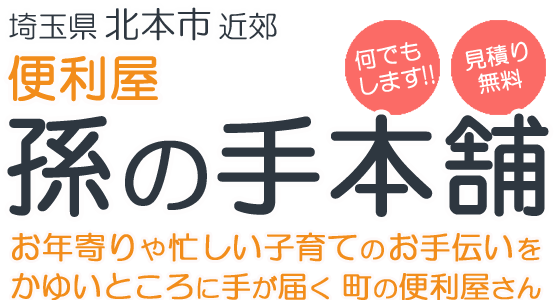
<style>
.page{position:relative;width:560px;height:300px;background:#ffffff}
.page>*{position:absolute;margin:0}
.t1{font:30px "HGMaruGothicMPRO";color:#2e3740}
.t2{font:36px "HGMaruGothicMPRO";color:#2e3740}
.t3{font:50px "HGMaruGothicMPRO";color:#f28d1b;font-weight:bold}
.t4{font:110px "HGMaruGothicMPRO";color:#2e3740;font-weight:bold}
.t5{font:90px "HGMaruGothicMPRO";color:#2e3740;font-weight:bold}
.t6{font:31px "HGMaruGothicMPRO";color:#f28d1b;font-weight:bold}
.t7{font:25px "HGMaruGothicMPRO";color:#f28d1b;font-weight:bold}
.t8{font:30px "HGMaruGothicMPRO";color:#f28d1b;font-weight:bold}
</style>
<div class="page">
<p class="t1" style="left:9px;top:7px;width:268px;height:34px">埼玉県<span class="t2">北本市</span>近郊</p>
<p class="t3" style="left:8px;top:55px;width:150px;height:47px">便利屋</p>
<p class="t4" style="left:7px;top:113px;width:542px;height:104px">孫<span class="t5">の</span>手本舗</p>
<p class="t6" style="left:12px;top:232px;width:529px;height:30px">お年寄り<span class="t7">や</span>忙しい子育て<span class="t7">の</span>お手伝い<span class="t7">を</span></p>
<p class="t8" style="left:11px;top:272px;width:530px;height:29px">かゆいところ<span class="t7">に</span>手<span class="t7">が</span>届<span class="t7">く</span>町<span class="t7">の</span>便利屋<span class="t7">さん</span></p>
</div>
